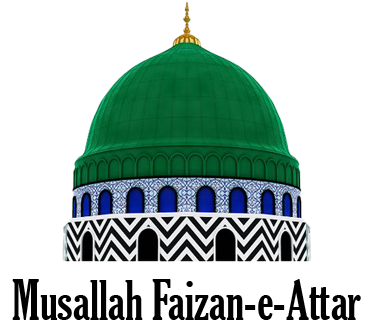
<style>
.page{position:relative;width:374px;height:336px;background:#ffffff}
.page>*{position:absolute;margin:0}
.t1{font:53px "GloucesterMT-ExtraCondensed";color:#010101}
</style>
<div class="page">
<p class="t1" style="left:12px;top:279px;width:349px;height:41px">Musallah Faizan-e-Attar</p>
</div>
